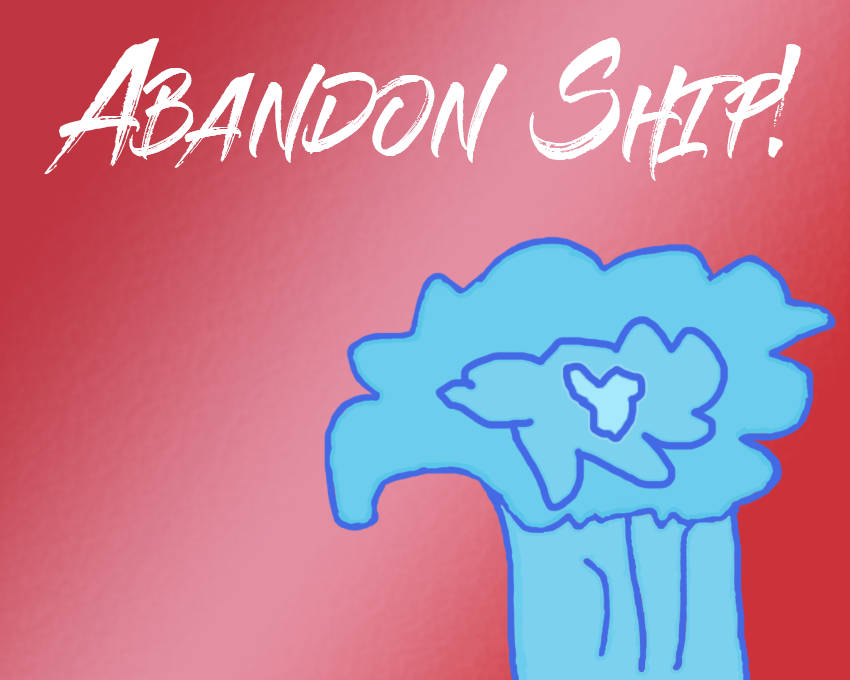
<style>
.page{position:relative;width:850px;height:680px}
.page>*{position:absolute;margin:0}
.t1{font:108.8px "GlossAndBloom";color:#ffffff;font-variant:small-caps}
</style>
<div class="page">
<p class="t1" style="left:44px;top:37px;width:757px;height:144px">Abandon Ship!</p>
</div>
